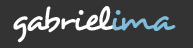
<style>
.page{position:relative;width:193px;height:48px;background:#333333}
.page>*{position:absolute;margin:0}
.t1{font:36px "Desyrel";color:#fefefe}
.t2{font:36px "Desyrel";color:#7fbbda}
</style>
<div class="page">
<p class="t1" style="left:13px;top:6px;width:163px;height:37px">gabriel<span class="t2">ima</span></p>
</div>
